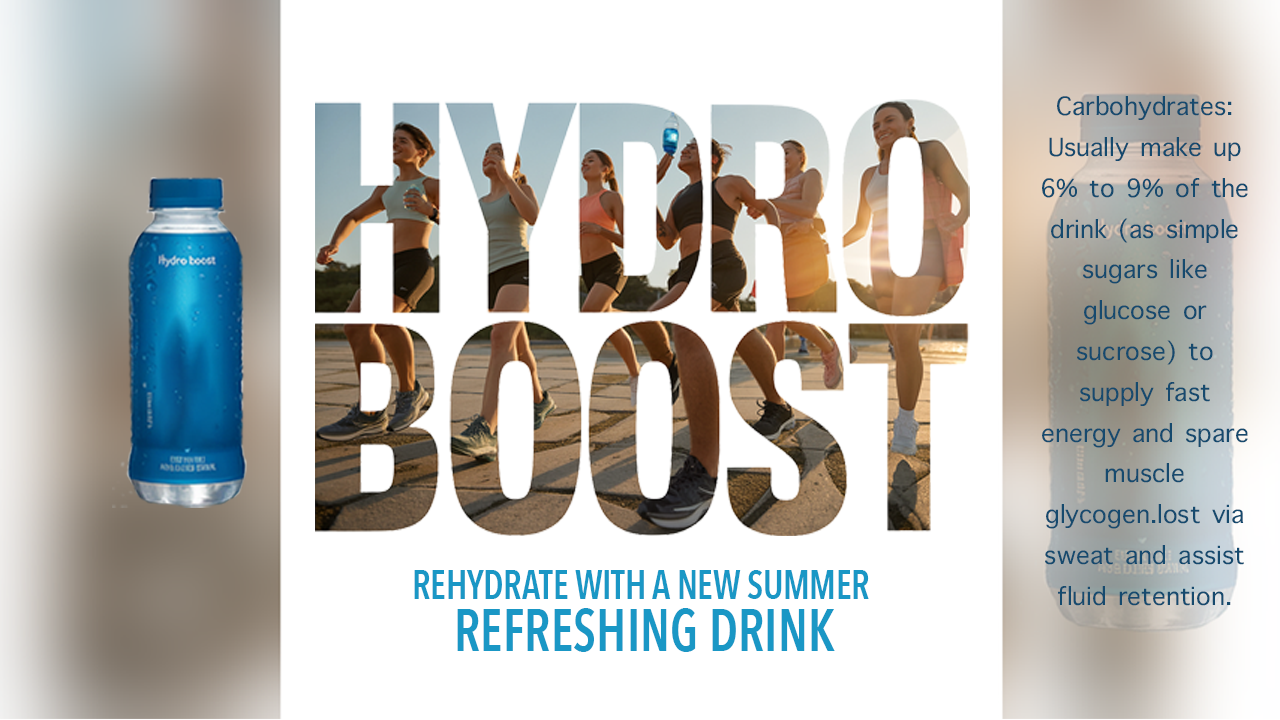
<style>
.page{position:relative;width:1280px;height:720px;background:#ffffff}
.page>*{position:absolute;margin:0}
.t1{font:34px "AppleSymbols";color:#164a6e}
.t2{font:40.7px/51.5px "AvenirNextCondensed-DemiBold";color:#1a97c5;scale:0.87 1}
.t3{font:58.8px/51.5px "AvenirNextCondensed-DemiBold";color:#1a97c5;scale:0.87 1}
</style>
<div class="page">
<p class="t1" style="left:1042px;top:96px;width:206px;height:510px;text-align:center">Carbohydrates: Usually make up 6% to 9% of the drink (as simple sugars like glucose or sucrose) to supply fast energy and spare muscle glycogen.lost via sweat and assist fluid retention.</p>
<p class="t2" style="left:414px;top:570px;width:455px;height:82px;text-align:center">REHYDRATE WITH A NEW SUMMER <br><span class="t3">REFRESHING DRINK</span></p>
</div>
